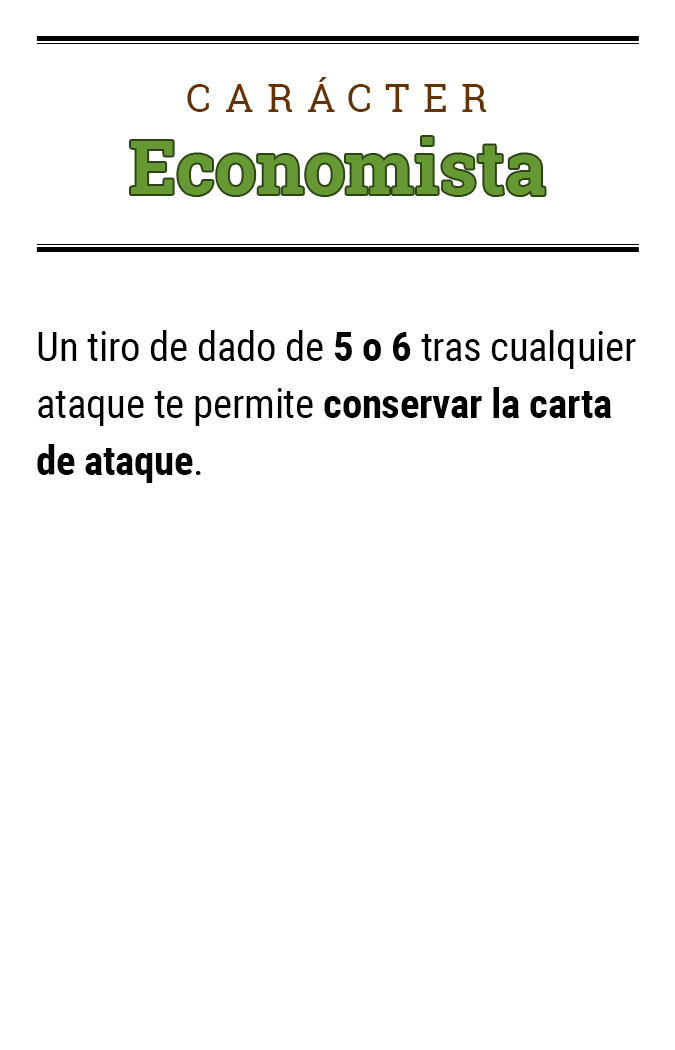
<style>
.page{position:relative;width:675px;height:1050px;background:#ffffff}
.page>*{position:absolute;margin:0}
.t1{font:39.2px "RobotoSlab-Regular";letter-spacing:0.34em;color:#663300}
.t2{font:74.5px "RobotoSlab-Bold";color:#669933}
.t3{font:41.1px/57.1px "RobotoCondensed-Regular";letter-spacing:-0.01em;color:#000000}
.t4{font:41.1px/57.1px "RobotoCondensed-Bold";letter-spacing:-0.01em;color:#000000}
</style>
<div class="page">
<p class="t1" style="left:187px;top:77px;width:300px;height:35px">CARÁCTER</p>
<p class="t2" style="left:131px;top:137px;width:414px;height:58px">Economista</p>
<p class="t3" style="left:37px;top:330px;width:599px;height:153px">Un tiro de dado de <span class="t4">5 o 6</span> tras cualquier ataque te permite <span class="t4">conservar la carta de ataque</span>.</p>
</div>
